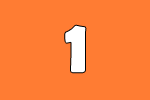
<style>
.page{position:relative;width:150px;height:100px;background:#ff7c33}
.page>*{position:absolute;margin:0}
.t1{font:75px "BerlinSansFBDemi-Bold";color:#ffffff;text-transform:uppercase}
</style>
<div class="page">
<p class="t1" style="left:65px;top:25px;width:21px;height:48px">1</p>
</div>
